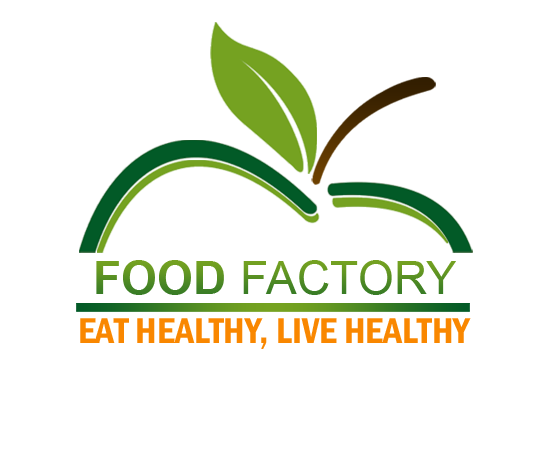
<style>
.page{position:relative;width:548px;height:452px;background:#ffffff}
.page>*{position:absolute;margin:0}
.t1{font:46.4px "ArialMT"}
.t2{font:46.4px "Arial-BoldMT"}
.t3{font:37.1px "FranklinGothic-DemiCond";color:#f98700}
</style>
<div class="page">
<p class="t1" style="left:96px;top:260px;width:360px;height:35px"><span class="t2">FOOD</span> FACTORY</p>
<p class="t3" style="left:80px;top:318px;width:391px;height:31px">EAT HEALTHY, LIVE HEALTHY</p>
</div>
